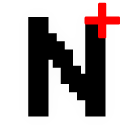
<style>
.page{position:relative;width:128px;height:128px;background:#ffffff}
.page>*{position:absolute;margin:0}
.t1{font:70px "Stencil";letter-spacing:0.01em;color:#ff0000;font-weight:bold}
.t2{font:130px "System";letter-spacing:0.01em;color:#000000;font-weight:bold}
</style>
<div class="page">
<p class="t1" style="left:84px;top:2px;width:36px;height:37px">+</p>
<p class="t2" style="left:28px;top:17px;width:78px;height:100px">N</p>
</div>
